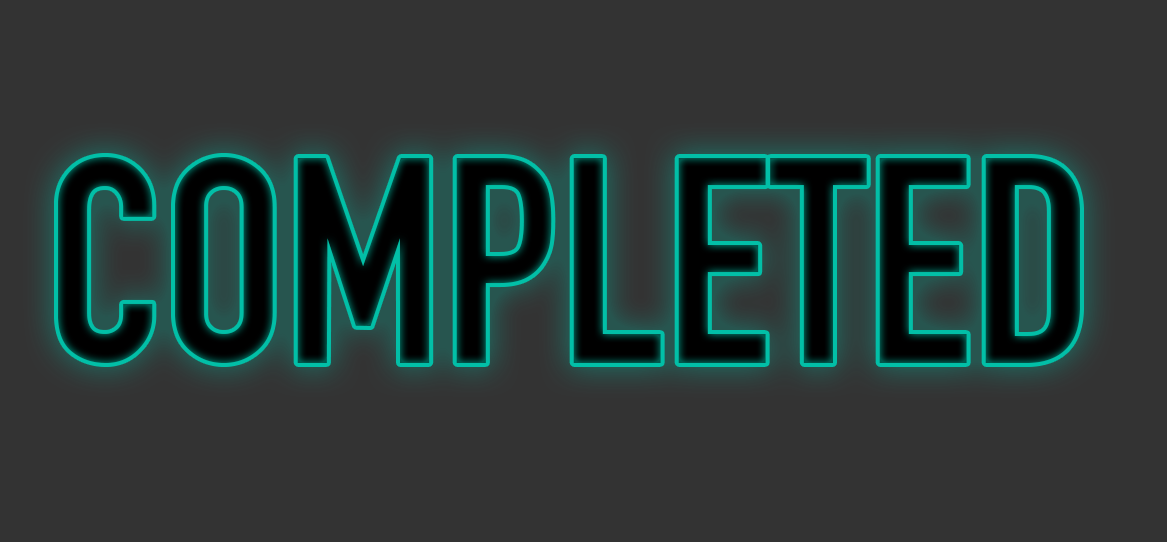
<style>
.page{position:relative;width:1167px;height:542px;background:#333333}
.page>*{position:absolute;margin:0}
.t1{font:285.8px "DINEngschrift"}
</style>
<div class="page">
<p class="t1" style="left:58px;top:157px;width:1022px;height:206px">COMPLETED</p>
</div>
